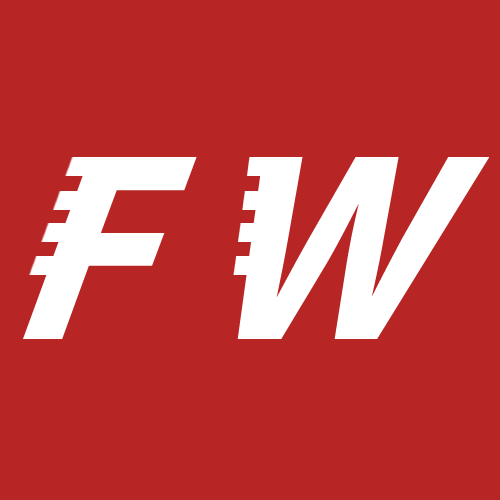
<style>
.page{position:relative;width:500px;height:500px;background:#b82525}
.page>*{position:absolute;margin:0}
.t1{font:270px "MyriadPro-BoldIt";color:#ffffff;font-style:italic}
</style>
<div class="page">
<p class="t1" style="left:23px;top:157px;width:466px;height:182px">F W</p>
</div>
